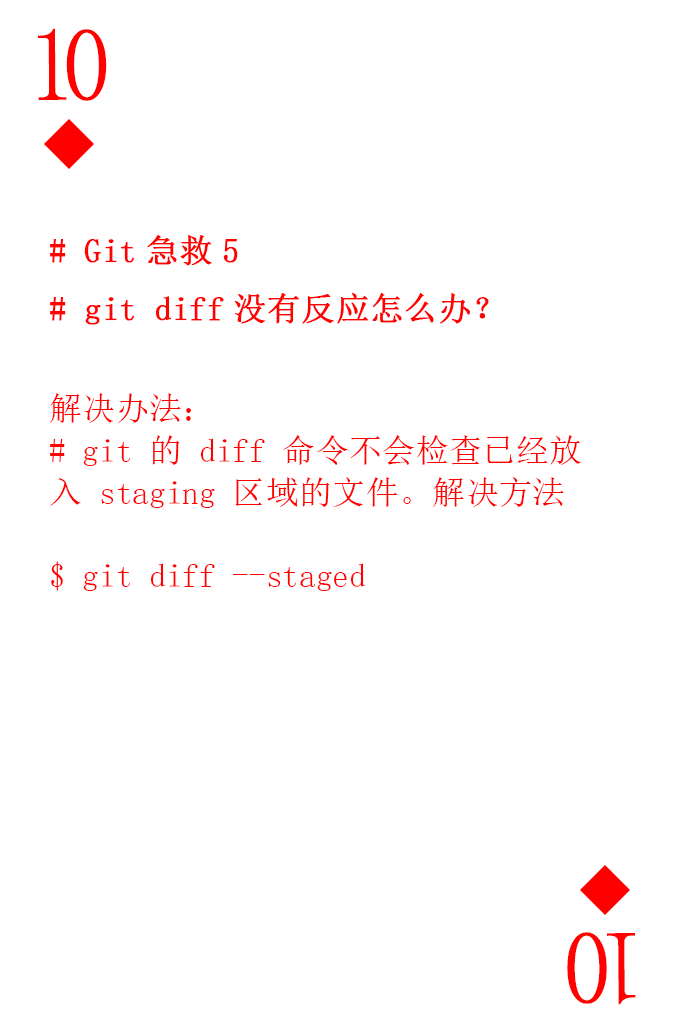
<style>
.page{position:relative;width:673px;height:1028px;background:#ffffff}
.page>*{position:absolute;margin:0}
.t1{font:104.2px "SimSun-ExtB";letter-spacing:-0.14em;color:#ff0101;scale:0.93 1}
.t2{font:33.3px/41.7px "SimSun";color:#ff0101}
.t3{font:33.3px "SimSun";color:#ff0101;font-weight:bold}
</style>
<div class="page">
<p class="t1" style="left:38px;top:28px;width:69px;height:73px">10</p>
<p class="t2" style="left:50px;top:235px;width:531px;height:356px"><span class="t3"># Git急救5<br># git diff没有反应怎么办？<br></span><br>解决办法：<br># git 的 diff 命令不会检查已经放<br>入 staging 区域的文件。解决方法<br><br>$ git diff --staged</p>
<p class="t1" style="left:567px;top:932px;width:69px;height:73px;rotate:180deg">10</p>
</div>
